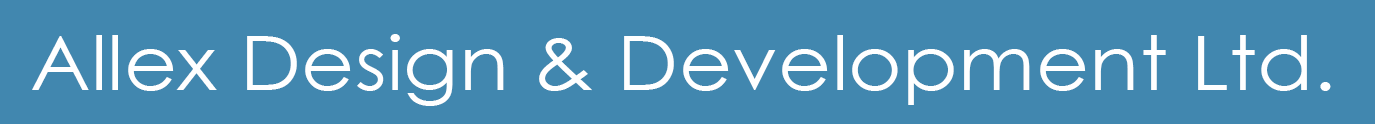
<style>
.page{position:relative;width:1375px;height:124px;background:#4187af}
.page>*{position:absolute;margin:0}
.t1{font:75px "CenturyGothic";color:#ffffff;scale:1.1 1}
</style>
<div class="page">
<p class="t1" style="left:32px;top:36px;width:57px;height:54px">A</p>
<p class="t1" style="left:32px;top:35px;width:70px;height:55px">Al</p>
<p class="t1" style="left:32px;top:35px;width:86px;height:55px">All</p>
<p class="t1" style="left:32px;top:35px;width:142px;height:56px">Alle</p>
<p class="t1" style="left:32px;top:35px;width:185px;height:56px">Allex</p>
<p class="t1" style="left:32px;top:35px;width:185px;height:56px">Allex</p>
<p class="t1" style="left:32px;top:35px;width:265px;height:56px">Allex D</p>
<p class="t1" style="left:32px;top:35px;width:319px;height:56px">Allex De</p>
<p class="t1" style="left:32px;top:35px;width:352px;height:56px">Allex Des</p>
<p class="t1" style="left:32px;top:34px;width:368px;height:57px">Allex Desi</p>
<p class="t1" style="left:32px;top:34px;width:421px;height:72px">Allex Desig</p>
<p class="t1" style="left:32px;top:34px;width:472px;height:72px">Allex Design</p>
<p class="t1" style="left:32px;top:34px;width:472px;height:72px">Allex Design</p>
<p class="t1" style="left:32px;top:34px;width:560px;height:72px">Allex Design &amp;</p>
<p class="t1" style="left:32px;top:34px;width:560px;height:72px">Allex Design &amp;</p>
<p class="t1" style="left:32px;top:34px;width:642px;height:72px">Allex Design &amp; D</p>
<p class="t1" style="left:32px;top:34px;width:697px;height:72px">Allex Design &amp; De</p>
<p class="t1" style="left:32px;top:34px;width:744px;height:72px">Allex Design &amp; Dev</p>
<p class="t1" style="left:32px;top:34px;width:796px;height:72px">Allex Design &amp; Deve</p>
<p class="t1" style="left:32px;top:34px;width:811px;height:72px">Allex Design &amp; Devel</p>
<p class="t1" style="left:32px;top:34px;width:866px;height:72px">Allex Design &amp; Develo</p>
<p class="t1" style="left:32px;top:34px;width:922px;height:72px">Allex Design &amp; Develop</p>
<p class="t1" style="left:32px;top:34px;width:998px;height:72px">Allex Design &amp; Developm</p>
<p class="t1" style="left:32px;top:34px;width:1054px;height:72px">Allex Design &amp; Developme</p>
<p class="t1" style="left:32px;top:34px;width:1102px;height:72px">Allex Design &amp; Developmen</p>
<p class="t1" style="left:32px;top:34px;width:1134px;height:72px">Allex Design &amp; Development</p>
<p class="t1" style="left:32px;top:34px;width:1134px;height:72px">Allex Design &amp; Development</p>
<p class="t1" style="left:32px;top:34px;width:1195px;height:72px">Allex Design &amp; Development L</p>
<p class="t1" style="left:32px;top:34px;width:1223px;height:72px">Allex Design &amp; Development Lt</p>
<p class="t1" style="left:32px;top:34px;width:1275px;height:72px">Allex Design &amp; Development Ltd</p>
<p class="t1" style="left:32px;top:34px;width:1299px;height:72px">Allex Design &amp; Development Ltd.</p>
<p class="t1" style="left:32px;top:34px;width:1299px;height:72px">Allex Design &amp; Development Ltd.</p>
</div>
